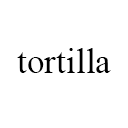
<style>
.page{position:relative;width:128px;height:128px;background:#ffffff}
.page>*{position:absolute;margin:0}
.t1{font:35.4px "TimesNewRomanPSMT";color:#000000}
</style>
<div class="page">
<p class="t1" style="left:17px;top:48px;width:94px;height:25px">tortilla</p>
</div>
